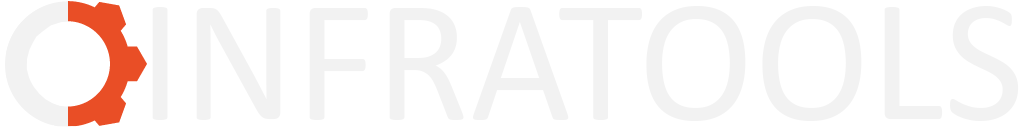
<style>
.page{position:relative;width:1020px;height:127px;background:#ffffff}
.page>*{position:absolute;margin:0}
.t1{font:175px "Calibri";color:#f2f2f2}
</style>
<div class="page">
<p class="t1" style="left:152px;top:6px;width:867px;height:115px">INFRATOOLS</p>
</div>
